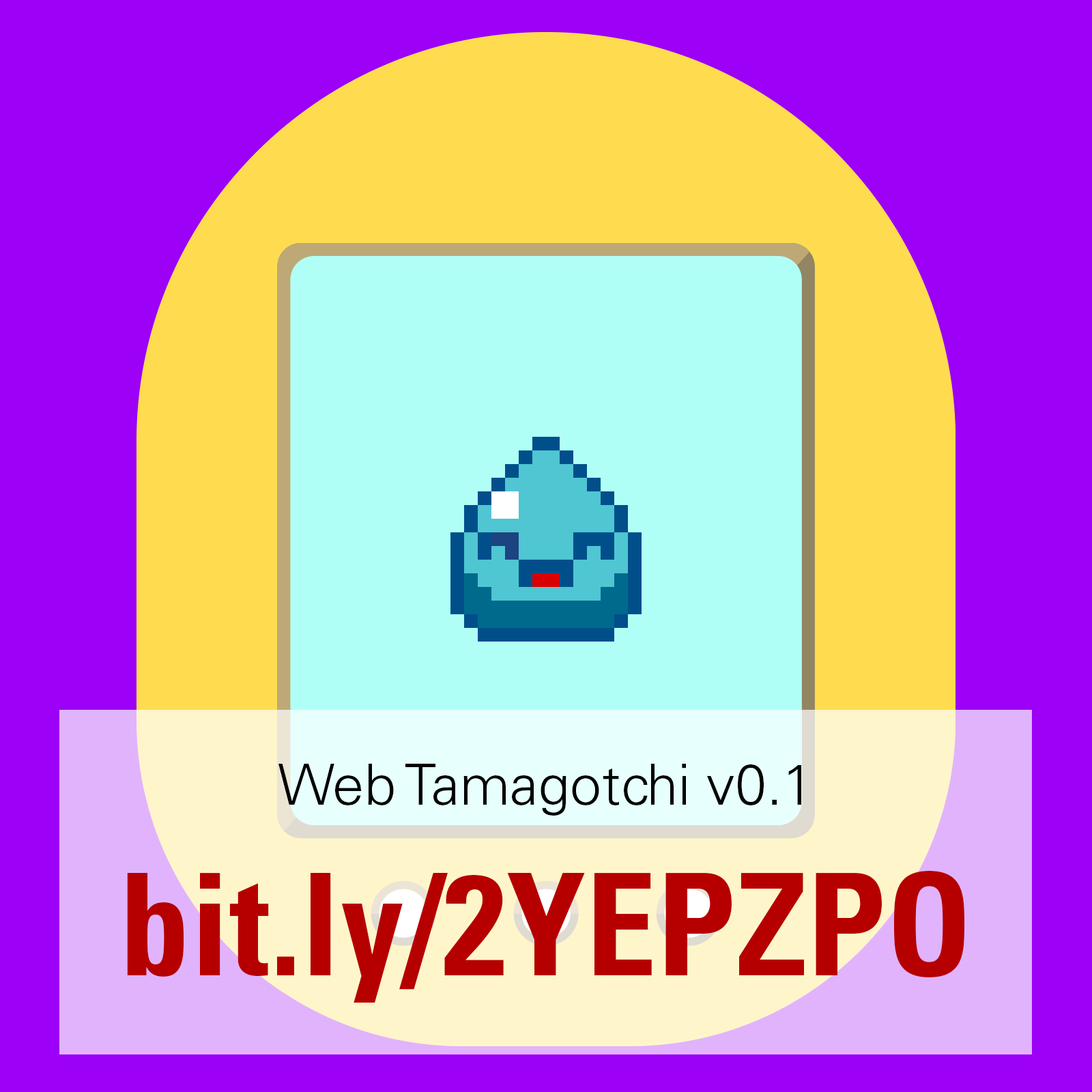
<style>
.page{position:relative;width:1092px;height:1092px;background:#9c00f7}
.page>*{position:absolute;margin:0}
.t1{font:56.9px "UniversLTStd-Light";color:#000000}
.t2{font:142.2px "UniversLTStd-BoldCn";color:#b60000}
</style>
<div class="page">
<p class="t1" style="left:127px;top:764px;width:837px;height:239px;text-align:center">Web Tamagotchi v0.1<br><span class="t2">bit.ly/2YEPZPO</span></p>
</div>
